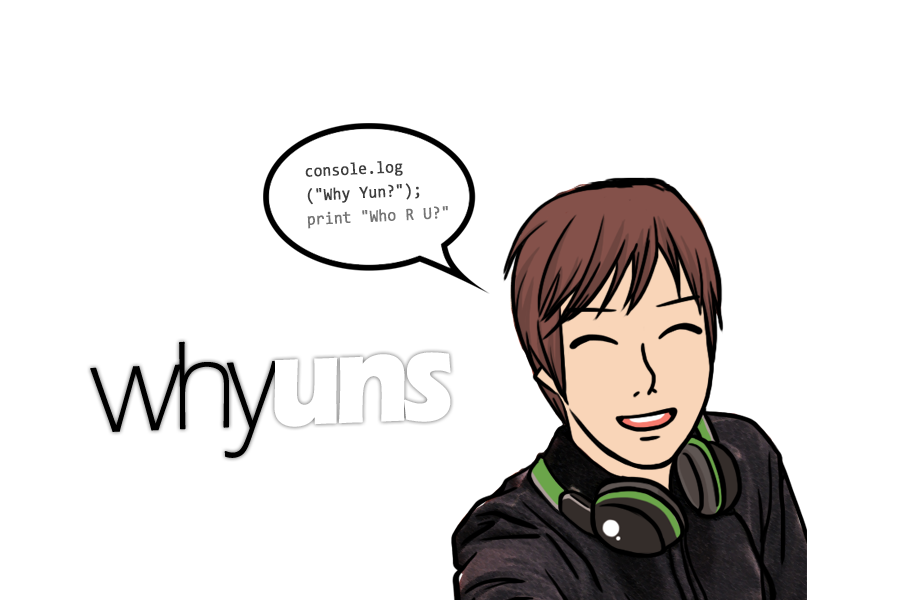
<style>
.page{position:relative;width:900px;height:600px;background:#ffffff}
.page>*{position:absolute;margin:0}
.t1{font:17.2px/24.1px "Consolas";color:#3e3e3e;font-weight:bold;scale:0.9 1}
.t2{font:17.2px/24.1px "Consolas";color:#757575;font-weight:bold;scale:0.9 1}
.t3{font:129.2px "ErasITC-Light";letter-spacing:-0.1em;color:#000000;font-weight:bold;scale:0.86 1}
.t4{font:129.2px "ErasITC-Bold";letter-spacing:-0.1em;color:#ffffff;font-weight:bold;scale:0.86 1}
</style>
<div class="page">
<p class="t1" style="left:305px;top:161px;width:143px;height:68px;rotate:-3deg">console.log<br>("Why Yun?");<br><span class="t2">print "Who R U?"</span></p>
<p class="t3" style="left:90px;top:341px;width:361px;height:117px;rotate:-2deg">why<span class="t4">uns</span></p>
</div>
